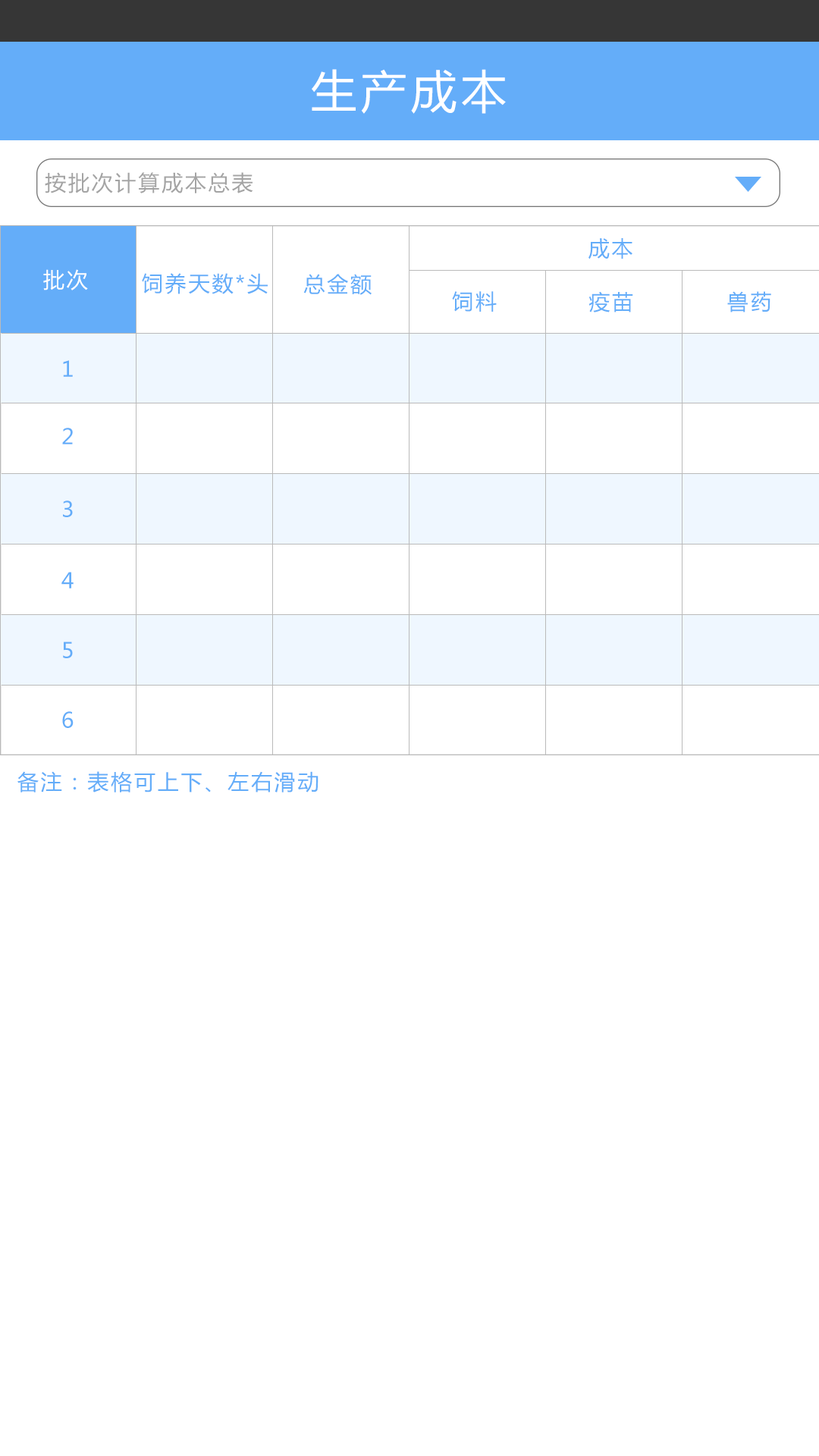
<style>
.page{position:relative;width:819px;height:1456px;background:#ffffff}
.page>*{position:absolute;margin:0}
.t1{font:45.5px "MicrosoftYaHei";letter-spacing:0.1em;color:#ffffff}
.t2{font:21.2px "MicrosoftYaHei";letter-spacing:0.1em;color:#a4a4a4}
.t3{font:21.2px "MicrosoftYaHei";letter-spacing:0.1em;color:#64adf9}
.t4{font:21.2px "MicrosoftYaHei";letter-spacing:0.1em;color:#ffffff}
</style>
<div class="page">
<p class="t1" style="left:312px;top:69px;width:194px;height:45px">生产成本</p>
<p class="t2" style="left:45px;top:172px;width:208px;height:21px">按批次计算成本总表</p>
<p class="t3" style="left:588px;top:238px;width:44px;height:21px">成本</p>
<p class="t4" style="left:43px;top:269px;width:45px;height:21px">批次</p>
<p class="t3" style="left:142px;top:273px;width:126px;height:21px">饲养天数*头</p>
<p class="t3" style="left:303px;top:274px;width:69px;height:21px">总金额</p>
<p class="t3" style="left:452px;top:291px;width:45px;height:21px">饲料</p>
<p class="t3" style="left:588px;top:291px;width:45px;height:21px">疫苗</p>
<p class="t3" style="left:727px;top:291px;width:44px;height:21px">兽药</p>
<p class="t3" style="left:63px;top:360px;width:10px;height:17px">1</p>
<p class="t3" style="left:62px;top:428px;width:11px;height:16px">2</p>
<p class="t3" style="left:63px;top:500px;width:10px;height:17px">3</p>
<p class="t3" style="left:61px;top:572px;width:13px;height:16px">4</p>
<p class="t3" style="left:63px;top:642px;width:10px;height:16px">5</p>
<p class="t3" style="left:62px;top:711px;width:12px;height:17px">6</p>
<p class="t3" style="left:17px;top:771px;width:301px;height:21px">备注：表格可上下、左右滑动</p>
</div>
